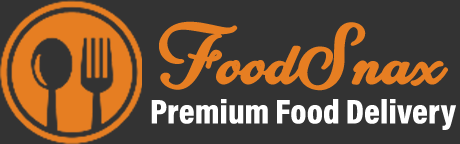
<style>
.page{position:relative;width:460px;height:144px;background:#333333}
.page>*{position:absolute;margin:0}
.t1{font:56.7px "CinderelaPersonalUse-Regular";color:#e67e22}
.t2{font:34.7px "AcuminConcept-CondensedBlack";color:#ffffff}
</style>
<div class="page">
<p class="t1" style="left:159px;top:21px;width:289px;height:70px">FoodSnax</p>
<p class="t2" style="left:151px;top:99px;width:305px;height:31px">Premium Food Delivery</p>
</div>
